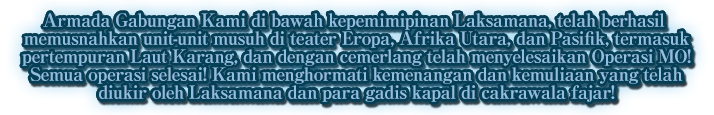
<style>
.page{position:relative;width:714px;height:115px;background:#053f55}
.page>*{position:absolute;margin:0}
.t1{font:18px/18px "RyuminPro-ExBold";letter-spacing:-0.04em;color:#93bee0}
</style>
<div class="page">
<p class="t1" style="left:22px;top:13px;width:669px;height:89px;text-align:center">Armada Gabungan Kami di bawah kepemimipinan Laksamana, telah berhasil <br>memusnahkan unit-unit musuh di teater Eropa, Afrika Utara, dan Pasifik, termasuk<br>pertempuran Laut Karang, dan dengan cemerlang telah menyelesaikan Operasi MO!<br>Semua operasi selesai! Kami menghormati kemenangan dan kemuliaan yang telah<br>diukir oleh Laksamana dan para gadis kapal di cakrawala fajar!</p>
</div>
